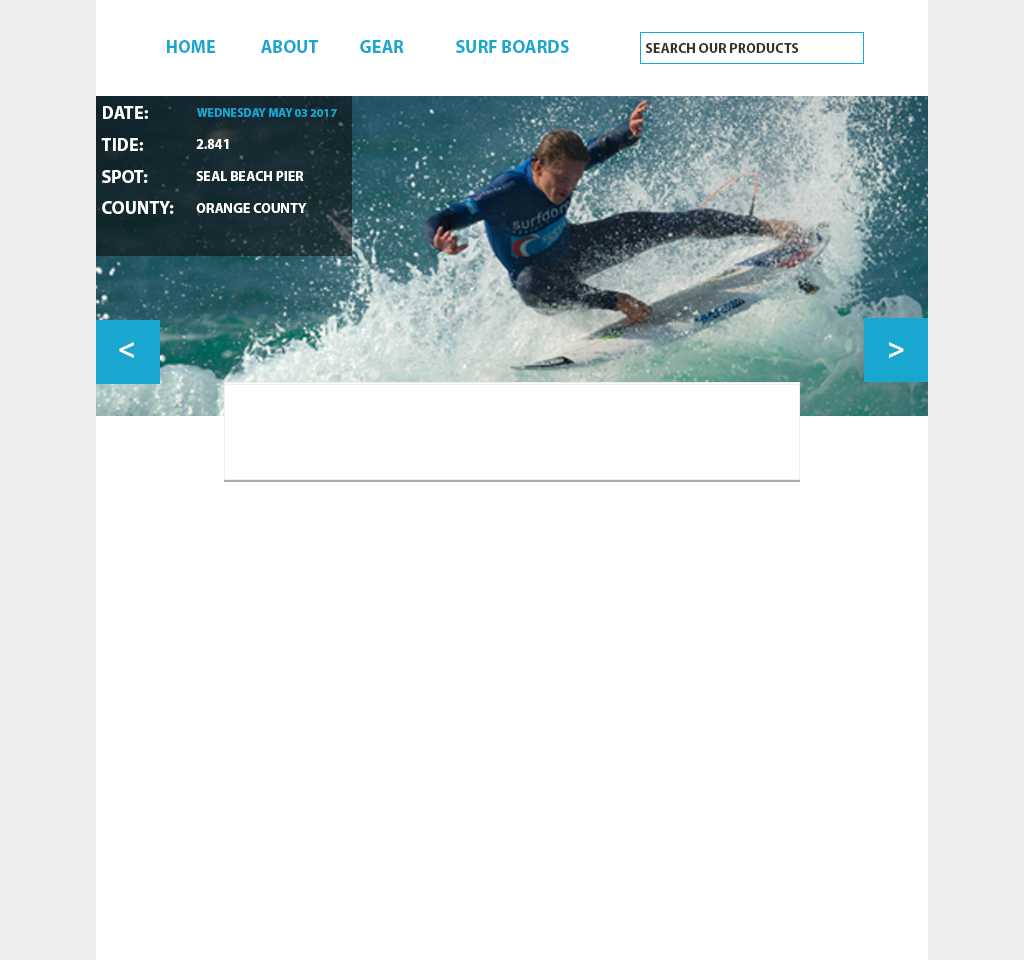
<style>
.page{position:relative;width:1024px;height:960px;background:#ffffff}
.page>*{position:absolute;margin:0}
.t1{font:18px "MyriadPro-Bold";color:#19a7d0}
.t2{font:14px "MyriadPro-Bold";color:#333333}
.t3{font:18px "MyriadPro-Bold";color:#ffffff}
.t4{font:12px "MyriadPro-Bold";color:#19a7d0}
.t5{font:14px "MyriadPro-Bold";color:#ffffff}
.t6{font:30px "MyriadPro-Bold";color:#ffffff}
</style>
<div class="page">
<p class="t1" style="left:167px;top:40px;width:48px;height:13px">HOME</p>
<p class="t1" style="left:261px;top:40px;width:57px;height:13px">ABOUT</p>
<p class="t1" style="left:360px;top:40px;width:44px;height:13px">GEAR</p>
<p class="t1" style="left:456px;top:40px;width:113px;height:13px">SURF BOARDS</p>
<p class="t2" style="left:646px;top:43px;width:153px;height:10px">SEARCH OUR PRODUCTS</p>
<p class="t3" style="left:103px;top:106px;width:45px;height:13px">DATE:</p>
<p class="t4" style="left:197px;top:108px;width:140px;height:9px">WEDNESDAY MAY 03 2017</p>
<p class="t3" style="left:101px;top:138px;width:42px;height:13px">TIDE:</p>
<p class="t5" style="left:196px;top:139px;width:33px;height:10px">2.841</p>
<p class="t3" style="left:102px;top:170px;width:46px;height:13px">SPOT:</p>
<p class="t5" style="left:196px;top:171px;width:108px;height:10px">SEAL BEACH PIER</p>
<p class="t3" style="left:102px;top:201px;width:72px;height:13px">COUNTY:</p>
<p class="t5" style="left:196px;top:203px;width:111px;height:10px">ORANGE COUNTY</p>
<p class="t6" style="left:119px;top:342px;width:15px;height:16px">&lt;</p>
<p class="t6" style="left:888px;top:342px;width:16px;height:16px">&gt;</p>
</div>
